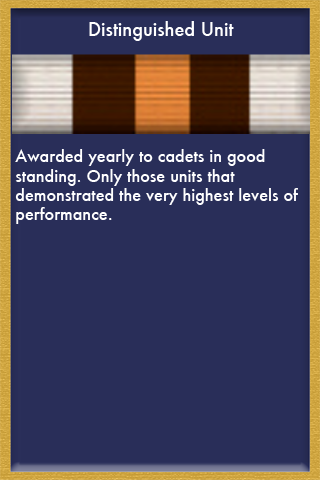
<style>
.page{position:relative;width:320px;height:480px;background:#292e59}
.page>*{position:absolute;margin:0}
.t1{font:18px "Futura-Medium";color:#ffffff}
.t2{font:16px "Futura-Medium";color:#ffffff}
</style>
<div class="page">
<p class="t1" style="left:89px;top:21px;width:145px;height:20px">Distinguished Unit</p>
<p class="t2" style="left:15px;top:149px;width:283px;height:75px">Awarded yearly to cadets in good <br>standing. Only those units that <br>demonstrated the very highest levels of <br>performance.</p>
</div>
